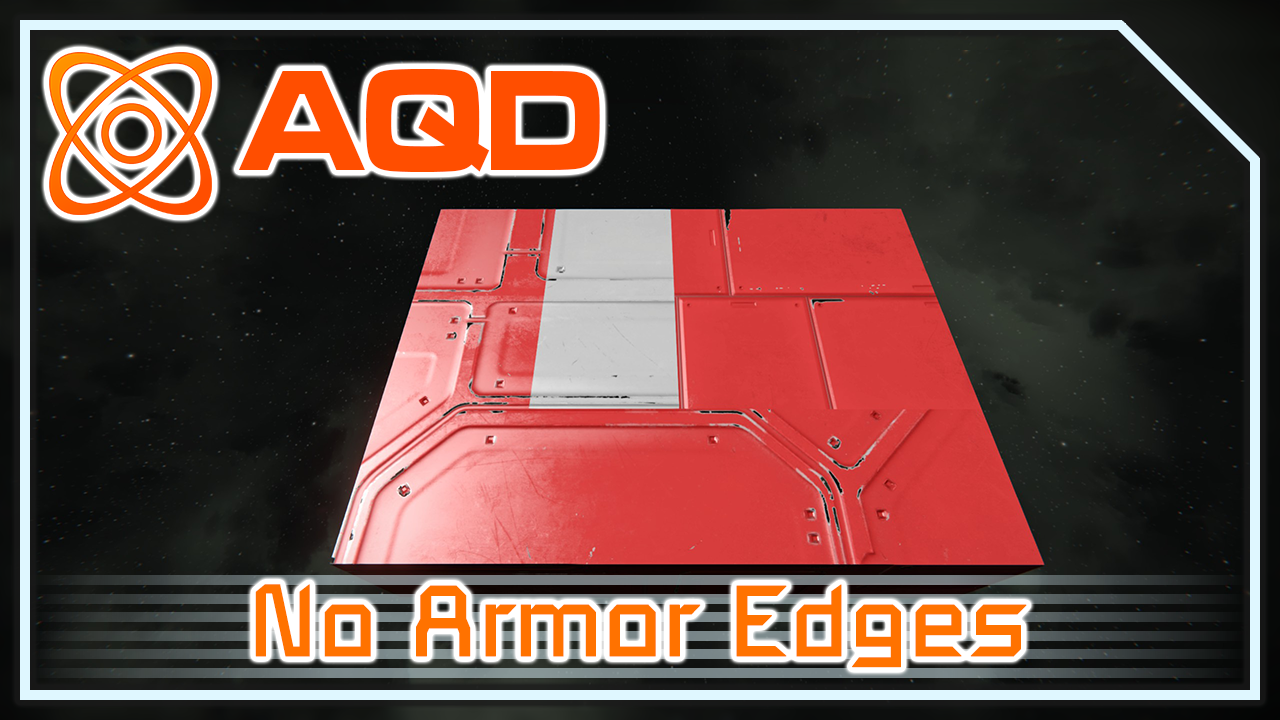
<style>
.page{position:relative;width:1280px;height:720px}
.page>*{position:absolute;margin:0}
.t1{font:148.7px "MicrogrammaD-BoldExte";color:#ff4e00;scale:0.83 1}
.t2{font:99px "SpaceEngineers";color:#ff7200;font-weight:bold}
</style>
<div class="page">
<p class="t1" style="left:238px;top:69px;width:362px;height:104px">AQD</p>
<p class="t2" style="left:255px;top:584px;width:772px;height:84px">No Armor Edges</p>
</div>
